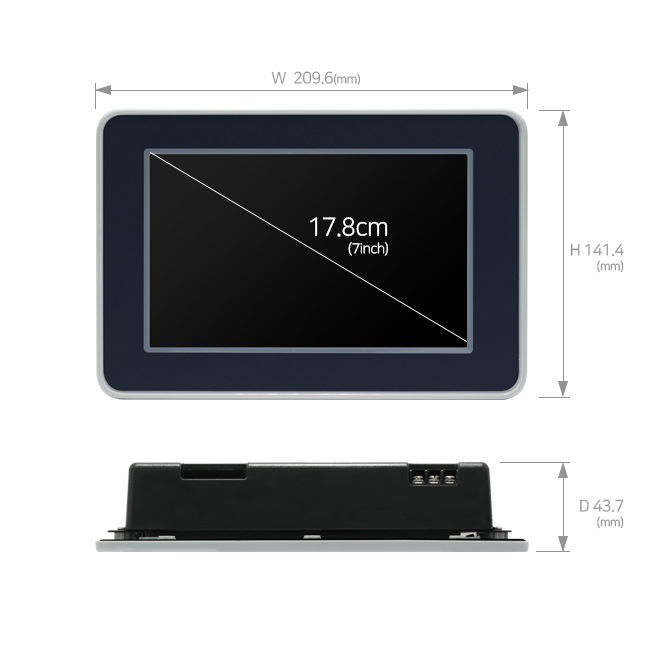
<style>
.page{position:relative;width:650px;height:650px;background:#ffffff}
.page>*{position:absolute;margin:0}
.t1{font:16px "NanumSquareR";letter-spacing:-0.03em;color:#939393}
.t2{font:12px "NanumSquareR";letter-spacing:-0.03em;color:#939393}
.t3{font:14px/18px "NanumSquareR";letter-spacing:-0.03em;color:#ffffff}
.t4{font:25px/18px "NanumSquareR";letter-spacing:-0.03em;color:#ffffff}
.t5{font:16px/15px "NanumSquareR";letter-spacing:-0.03em;color:#939393}
.t6{font:12px/15px "NanumSquareR";letter-spacing:-0.03em;color:#939393}
</style>
<div class="page">
<p class="t1" style="left:271px;top:71px;width:89px;height:15px">W  209.6<span class="t2">(mm)</span></p>
<p class="t3" style="left:310px;top:217px;width:78px;height:39px;text-align:right"><span class="t4">17.8cm<br></span>(7inch)</p>
<p class="t5" style="left:570px;top:243px;width:54px;height:30px;text-align:right">H 141.4<br><span class="t6">(mm)</span></p>
<p class="t5" style="left:580px;top:499px;width:44px;height:30px;text-align:right">D 43.7<br><span class="t6">(mm)</span></p>
</div>
